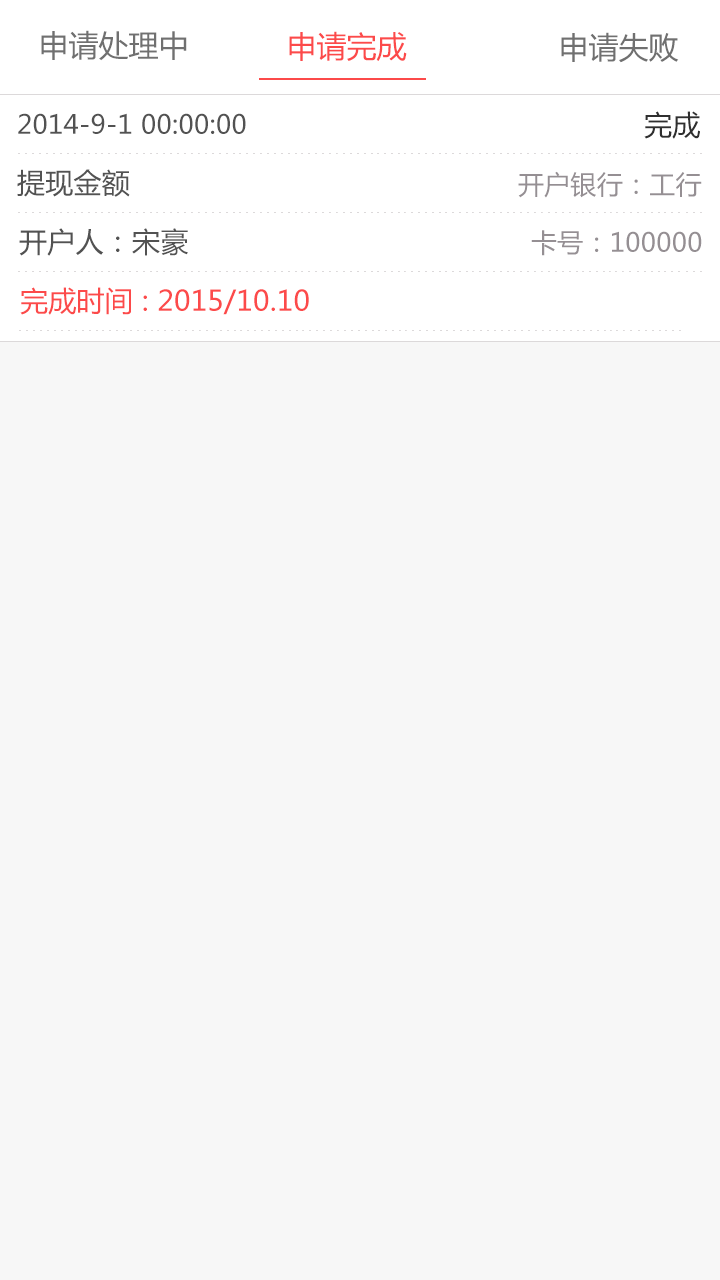
<style>
.page{position:relative;width:720px;height:1280px;background:#f7f7f7}
.page>*{position:absolute;margin:0}
.t1{font:30px "MicrosoftYaHei";color:#707070}
.t2{font:30px "MicrosoftYaHei";color:#fc4a4a}
.t3{font:26px "MicrosoftYaHei";letter-spacing:0.01em;color:#525252}
.t4{font:28px "MicrosoftYaHei";letter-spacing:0.01em;color:#2f2f2f}
.t5{font:28px "MicrosoftYaHei";letter-spacing:0.01em;color:#525252}
.t6{font:26px "MicrosoftYaHei";letter-spacing:0.01em;color:#958f93}
.t7{font:28px "MicrosoftYaHei";letter-spacing:0.01em;color:#fc4a4a}
</style>
<div class="page">
<p class="t1" style="left:41px;top:30px;width:146px;height:31px">申请处理中</p>
<p class="t2" style="left:289px;top:31px;width:118px;height:30px">申请完成</p>
<p class="t1" style="left:561px;top:32px;width:118px;height:31px">申请失败</p>
<p class="t3" style="left:18px;top:113px;width:228px;height:21px">2014-9-1 00:00:00</p>
<p class="t4" style="left:644px;top:111px;width:56px;height:28px">完成</p>
<p class="t5" style="left:17px;top:169px;width:113px;height:28px">提现金额</p>
<p class="t6" style="left:518px;top:171px;width:184px;height:27px">开户银行：工行</p>
<p class="t5" style="left:19px;top:228px;width:169px;height:28px">开户人：宋豪</p>
<p class="t6" style="left:531px;top:230px;width:171px;height:26px">卡号：100000</p>
<p class="t7" style="left:20px;top:287px;width:289px;height:28px">完成时间 : 2015/10.10</p>
</div>
